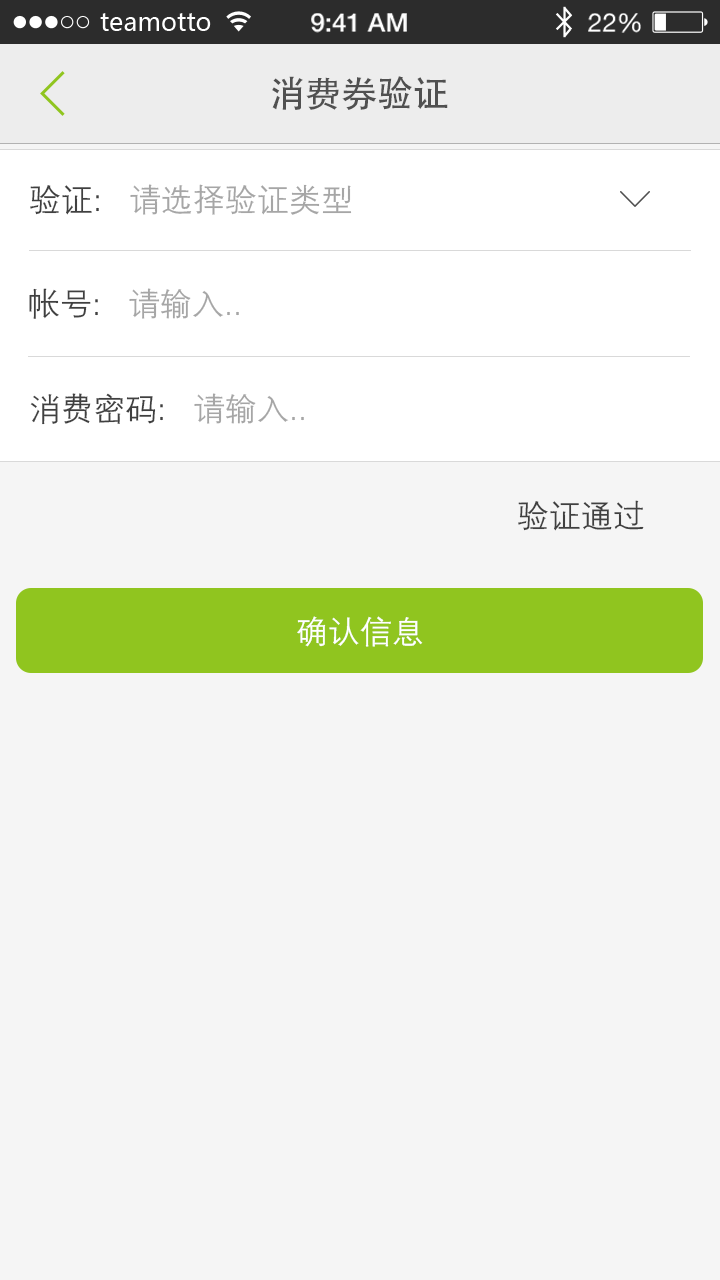
<style>
.page{position:relative;width:720px;height:1280px;background:#f5f5f5}
.page>*{position:absolute;margin:0}
.t1{font:36px "AdobeHeitiStd-Regular";color:#505050}
.t2{font:32px "FZZDXJW--GB1-0";color:#a6a6a6}
.t3{font:32px "FZZDXJW--GB1-0";color:#404040}
.t4{font:32px "FZZDXJW--GB1-0";color:#ffffff}
</style>
<div class="page">
<p class="t1" style="left:272px;top:76px;width:176px;height:34px">消费券验证</p>
<p class="t2" style="left:30px;top:184px;width:322px;height:31px"><span class="t3">验证:   </span>请选择验证类型</p>
<p class="t2" style="left:29px;top:288px;width:210px;height:31px"><span class="t3">帐号:   </span>请输入..</p>
<p class="t3" style="left:30px;top:393px;width:274px;height:32px">消费密码:   <span class="t2">请输入..</span></p>
<p class="t3" style="left:518px;top:500px;width:126px;height:31px">验证通过</p>
<p class="t4" style="left:297px;top:616px;width:126px;height:31px">确认信息</p>
</div>
